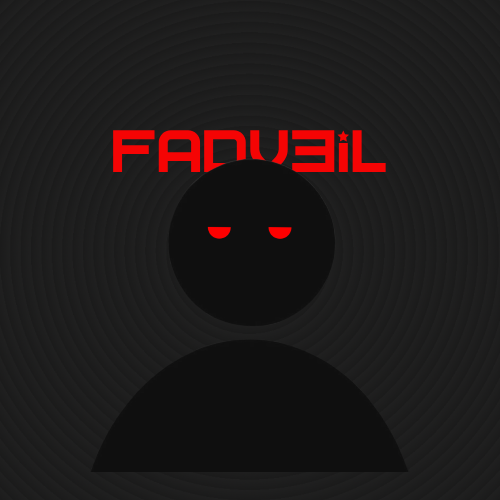
<style>
.page{position:relative;width:500px;height:500px}
.page>*{position:absolute;margin:0}
.t1{font:59.9px "SovietProgram-Regular";color:#f50404}
</style>
<div class="page">
<p class="t1" style="left:113px;top:130px;width:273px;height:42px">FadVeil</p>
</div>
